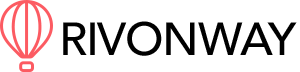
<style>
.page{position:relative;width:300px;height:72px;background:#ffffff}
.page>*{position:absolute;margin:0}
.t1{font:46px "Avenir-Medium";letter-spacing:-0.025em;color:#000000;text-transform:uppercase}
</style>
<div class="page">
<p class="t1" style="left:63px;top:21px;width:234px;height:35px">Rivonway</p>
</div>
